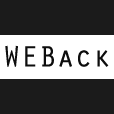
<style>
.page{position:relative;width:114px;height:114px;background:#1b1b1b}
.page>*{position:absolute;margin:0}
.t1{font:30px "OratorStd";color:#0d0d0d}
</style>
<div class="page">
<p class="t1" style="left:5px;top:45px;width:104px;height:22px">WEBack</p>
</div>
